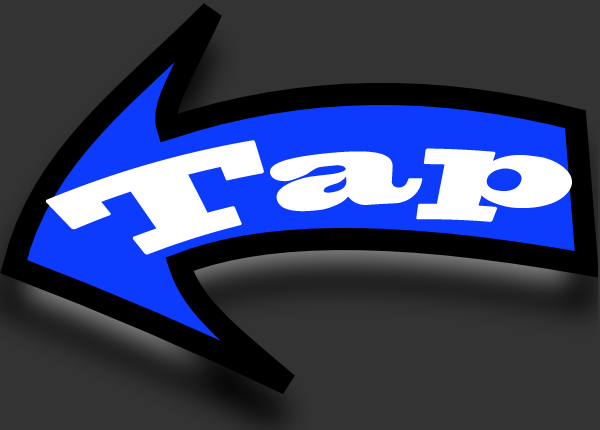
<style>
.page{position:relative;width:600px;height:430px;background:#333333}
.page>*{position:absolute;margin:0}
.t1{font:97.7px "BlackoakStd";color:#ffffff}
</style>
<div class="page">
<p class="t1" style="left:46px;top:140px;width:526px;height:115px;rotate:-7deg">Tap</p>
</div>
